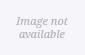
<style>
.page{position:relative;width:85px;height:55px;background:#f6f6fa}
.page>*{position:absolute;margin:0}
.t1{font:11px "DroidSerif-Italic";color:#b4b4be}
</style>
<div class="page">
<p class="t1" style="left:16px;top:17px;width:52px;height:21px;text-align:center">Image not<br>available</p>
</div>
